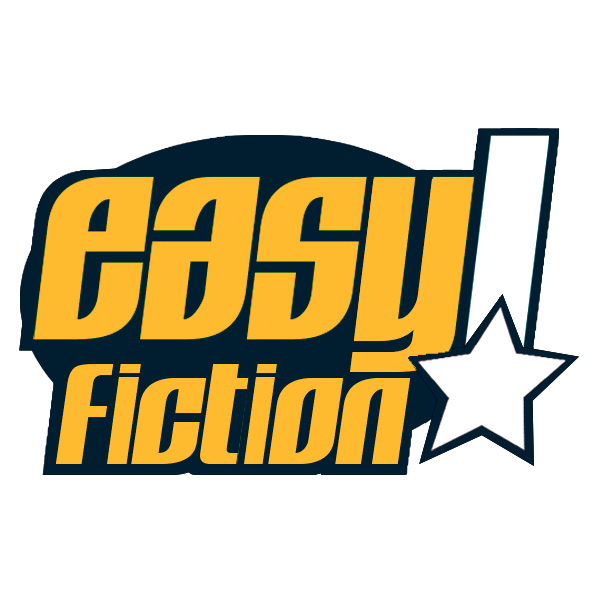
<style>
.page{position:relative;width:600px;height:600px;background:#ffffff}
.page>*{position:absolute;margin:0}
.t1{font:231.6px "CAVALIER-XBOLD";color:#ffbb30}
.t2{font:125px "CAVALIER-XBOLD";color:#ffbb30;scale:1.17 1}
</style>
<div class="page">
<p class="t1" style="left:350px;top:183px;width:123px;height:194px">y</p>
<p class="t1" style="left:350px;top:178px;width:123px;height:194px">y</p>
<p class="t2" style="left:55px;top:364px;width:356px;height:100px">fiction</p>
</div>
